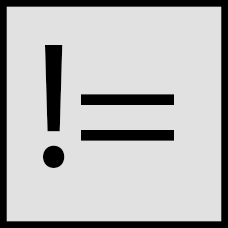
<style>
.page{position:relative;width:228px;height:228px;background:#e1e1e1}
.page>*{position:absolute;margin:0}
.t1{font:180px "MyriadPro-Regular";color:#000000}
</style>
<div class="page">
<p class="t1" style="left:43px;top:45px;width:131px;height:123px">!=</p>
</div>
